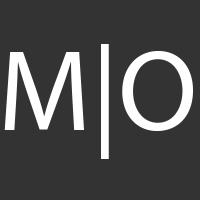
<style>
.page{position:relative;width:200px;height:200px;background:#333333}
.page>*{position:absolute;margin:0}
.t1{font:115px "MyriadPro-Regular";color:#ffffff}
</style>
<div class="page">
<p class="t1" style="left:4px;top:44px;width:189px;height:115px">M|O</p>
</div>
